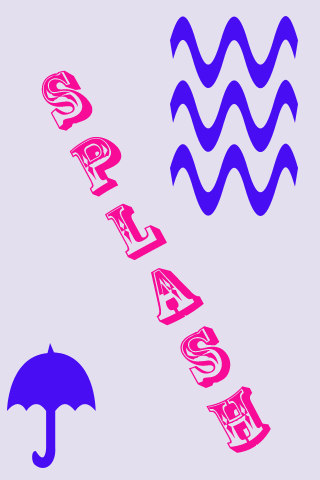
<style>
.page{position:relative;width:320px;height:480px;background:#e3dfee}
.page>*{position:absolute;margin:0}
.t1{font:68.3px "RosewoodStd-Regular";color:#f80b96;scale:1.05 1}
</style>
<div class="page">
<p class="t1" style="left:41px;top:70px;width:230px;height:383px;rotate:-29deg">SPLASH</p>
</div>
